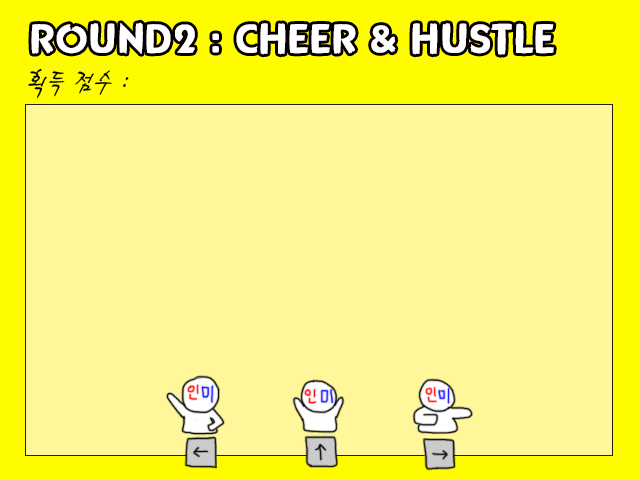
<style>
.page{position:relative;width:640px;height:480px;background:#fff799}
.page>*{position:absolute;margin:0}
.t1{font:36px "Mpop";color:#ffffff}
.t2{font:30px "HaanCjaB";color:#000000}
</style>
<div class="page">
<p class="t1" style="left:31px;top:22px;width:523px;height:33px">ROUND2 : CHEER &amp; HUSTLE</p>
<p class="t2" style="left:28px;top:68px;width:101px;height:31px">획득 점수 :</p>
</div>
